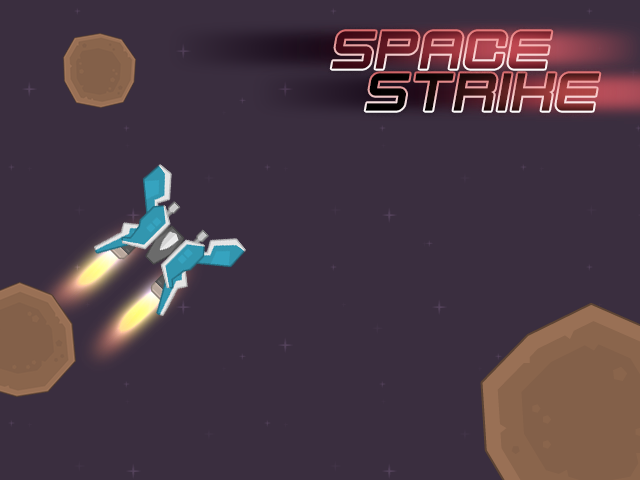
<style>
.page{position:relative;width:640px;height:480px;background:#3a2e3f}
.page>*{position:absolute;margin:0}
.t1{font:60px "KenVector-Future";letter-spacing:-0.1em;font-style:italic}
</style>
<div class="page">
<p class="t1" style="left:331px;top:31px;width:221px;height:38px">SPACE</p>
<p class="t1" style="left:365px;top:73px;width:235px;height:38px">Strike</p>
</div>
